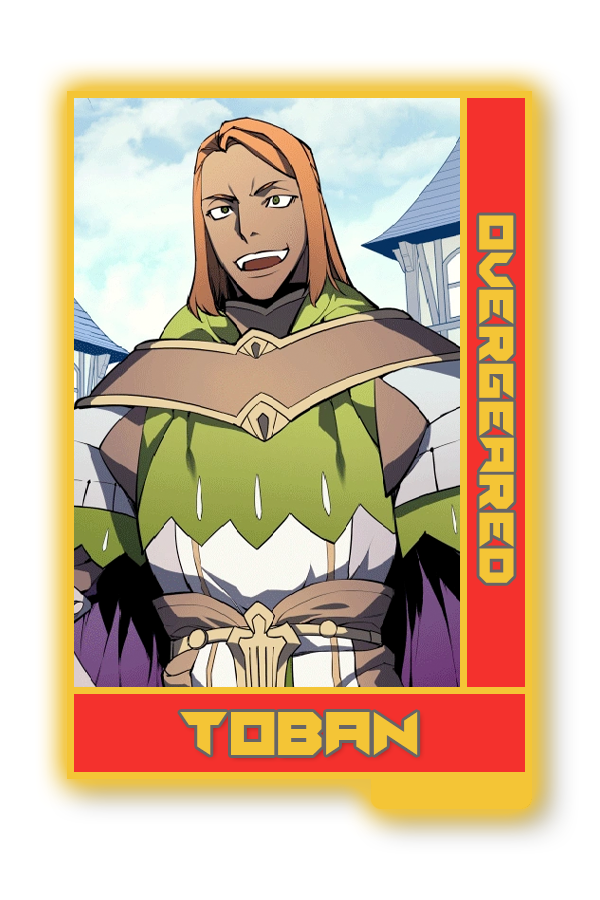
<style>
.page{position:relative;width:600px;height:900px;background:#ffffff}
.page>*{position:absolute;margin:0}
.t1{font:48.8px "Suggested-Regular";color:#f4c536}
.t2{font:62.5px "Suggested-Regular";color:#f4c536}
</style>
<div class="page">
<p class="t1" style="left:479px;top:215px;width:35px;height:368px;rotate:90deg">OVERGEARED</p>
<p class="t2" style="left:180px;top:712px;width:238px;height:43px">TOBAN</p>
</div>
